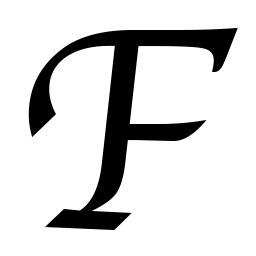
<style>
.page{position:relative;width:256px;height:256px;background:#ffffff}
.page>*{position:absolute;margin:0}
.t1{font:300px "Apple-Chancery";color:#000000}
</style>
<div class="page">
<p class="t1" style="left:28px;top:28px;width:210px;height:202px">F</p>
</div>
